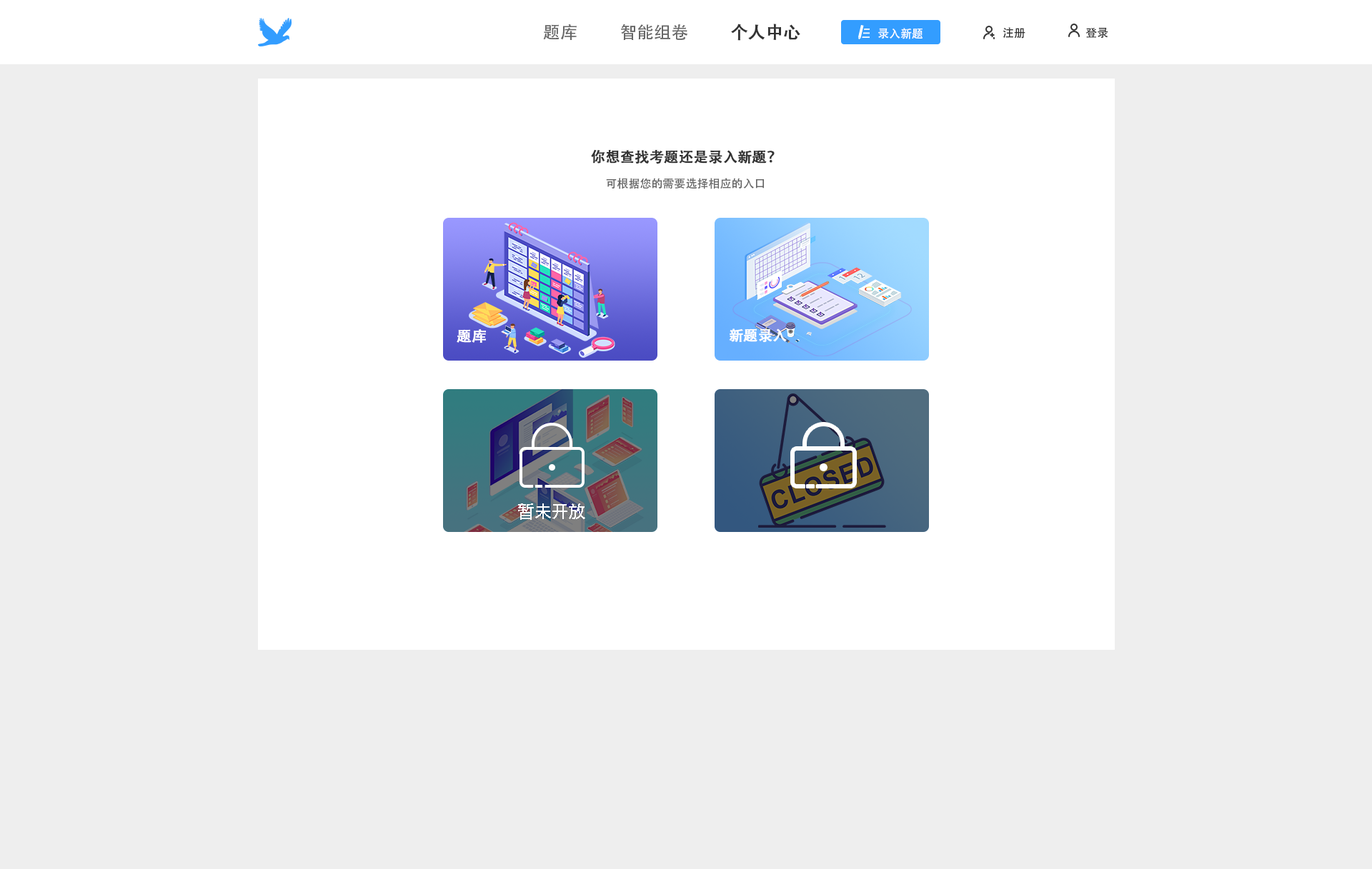
<style>
.page{position:relative;width:1372px;height:869px;background:#eeeeee}
.page>*{position:absolute;margin:0}
.t1{font:17.1px "AdobeHeitiStd-Regular";color:#666666}
.t2{font:17.1px "AdobeHeitiStd-Regular";color:#333333;font-weight:bold}
.t3{font:11.4px "AdobeHeitiStd-Regular";color:#ffffff}
.t4{font:11.4px "AdobeHeitiStd-Regular";color:#333333}
.t5{font:14.3px "AdobeHeitiStd-Regular";color:#333333;font-weight:bold}
.t6{font:11.4px "AdobeHeitiStd-Regular";color:#666666}
.t7{font:14.3px "AdobeHeitiStd-Regular";color:#ffffff;font-weight:bold}
.t8{font:17.1px "SourceHanSansCN-Medium";color:#ffffff}
</style>
<div class="page">
<p class="t1" style="left:543px;top:24px;width:33px;height:16px">题库</p>
<p class="t1" style="left:621px;top:24px;width:67px;height:16px">智能组卷</p>
<p class="t2" style="left:731px;top:24px;width:69px;height:17px">个人中心</p>
<p class="t3" style="left:878px;top:28px;width:44px;height:11px">录入新题</p>
<p class="t4" style="left:1002px;top:27px;width:23px;height:12px">注册</p>
<p class="t4" style="left:1085px;top:27px;width:23px;height:12px">登录</p>
<p class="t5" style="left:591px;top:149px;width:183px;height:15px">你想查找考题还是录入新题？</p>
<p class="t6" style="left:606px;top:178px;width:158px;height:11px">可根据您的需要选择相应的入口</p>
<p class="t7" style="left:456px;top:329px;width:30px;height:14px">题库</p>
<p class="t7" style="left:729px;top:329px;width:58px;height:14px">新题录入</p>
<p class="t8" style="left:518px;top:504px;width:67px;height:16px">暂未开放</p>
</div>
